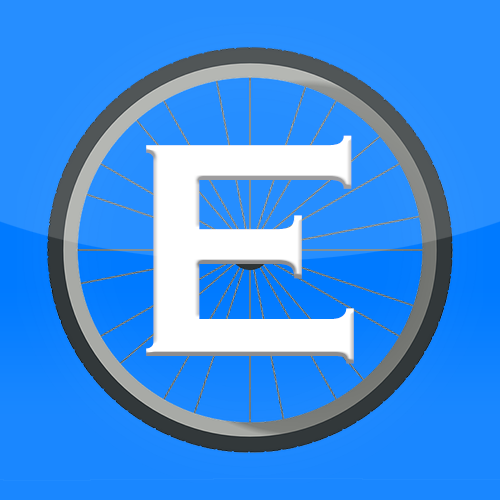
<style>
.page{position:relative;width:500px;height:500px;background:#268eff}
.page>*{position:absolute;margin:0}
.t1{font:400px "Copperplate";color:#ffffff}
</style>
<div class="page">
<p class="t1" style="left:146px;top:135px;width:208px;height:229px">E</p>
</div>
